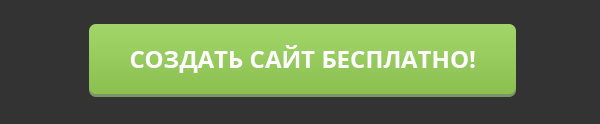
<style>
.page{position:relative;width:600px;height:124px;background:#333333}
.page>*{position:absolute;margin:0}
.t1{font:24px "OpenSans-Bold";color:#ffffff;text-transform:uppercase}
</style>
<div class="page">
<p class="t1" style="left:130px;top:45px;width:345px;height:28px">создать сайт бесплатно!</p>
</div>
